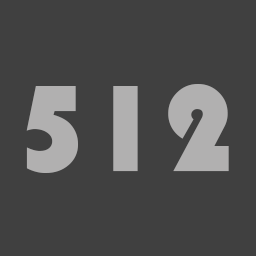
<style>
.page{position:relative;width:256px;height:256px;background:#404040}
.page>*{position:absolute;margin:0}
.t1{font:128px "Bauhaus93";color:#b1b0b0}
</style>
<div class="page">
<p class="t1" style="left:26px;top:84px;width:203px;height:89px">512</p>
</div>
